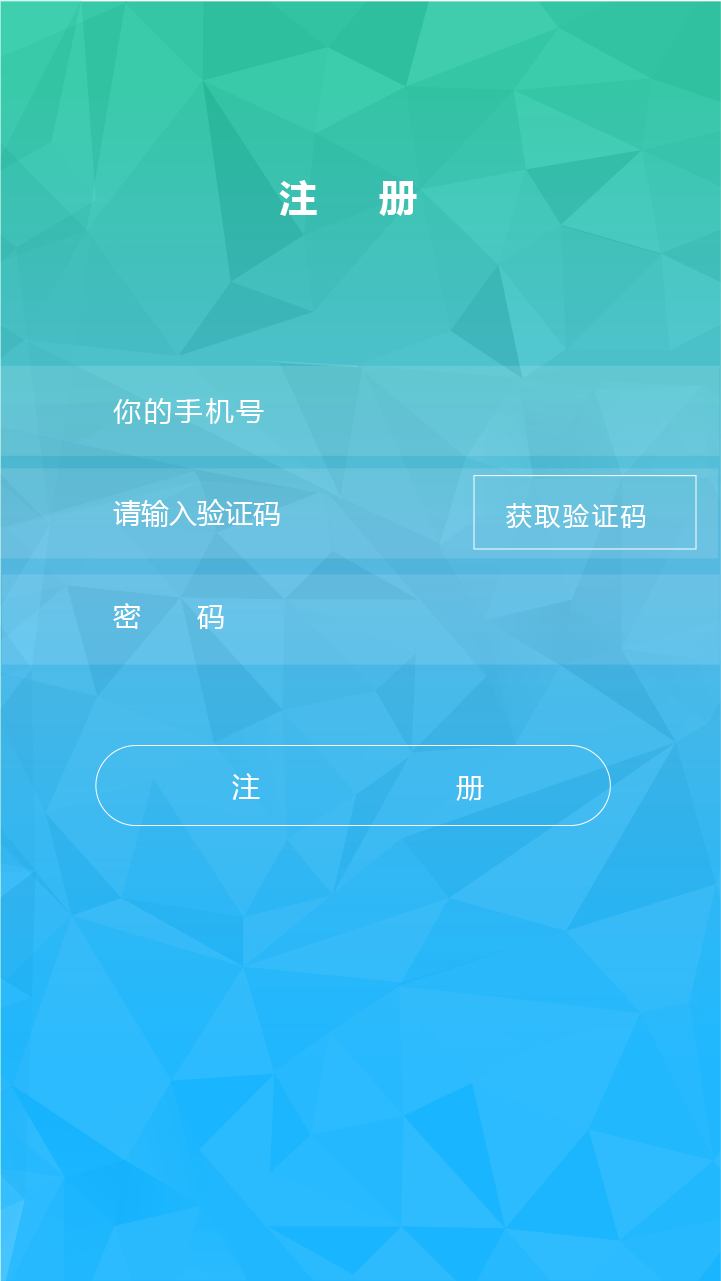
<style>
.page{position:relative;width:721px;height:1281px}
.page>*{position:absolute;margin:0}
.t1{font:38px "MicrosoftYaHei-Bold";letter-spacing:0.32em;color:#ffffff}
.t2{font:28px/102.4px "MicrosoftYaHei";color:#ffffff}
.t3{font:28px/102.4px "MicrosoftYaHei";letter-spacing:0.1em;color:#ffffff}
.t4{font:26px "MicrosoftYaHei";letter-spacing:0.1em;color:#ffffff}
.t5{font:28px "MicrosoftYaHei";color:#ffffff}
</style>
<div class="page">
<p class="t1" style="left:279px;top:180px;width:138px;height:36px">注　册</p>
<p class="t2" style="left:113px;top:398px;width:167px;height:231px"><span class="t3">你的手机号<br></span>请输入验证码<br>密　　码</p>
<p class="t4" style="left:506px;top:503px;width:140px;height:25px">获取验证码</p>
<p class="t5" style="left:232px;top:773px;width:252px;height:28px">注　　　　　　　册</p>
</div>
